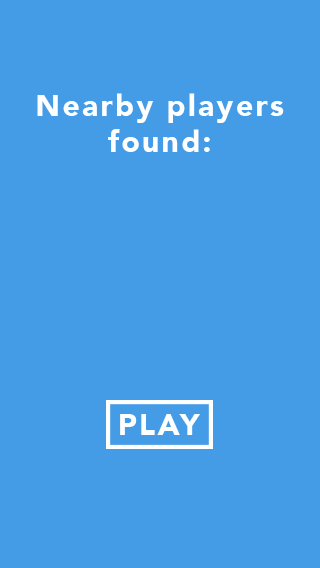
<style>
.page{position:relative;width:320px;height:568px;background:#449ce7}
.page>*{position:absolute;margin:0}
.t1{font:30.2px "Avenir-Black";letter-spacing:0.075em;color:#feffff}
</style>
<div class="page">
<p class="t1" style="left:37px;top:93px;width:247px;height:59px;text-align:center">Nearby players<br>found:</p>
<p class="t1" style="left:120px;top:414px;width:80px;height:21px">PLAY</p>
</div>
